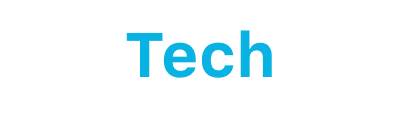
<style>
.page{position:relative;width:400px;height:120px;background:#ffffff}
.page>*{position:absolute;margin:0}
.t1{font:62.5px "SFUIText-Bold";letter-spacing:0.01em;color:#08b2e3}
</style>
<div class="page">
<p class="t1" style="left:126px;top:30px;width:146px;height:48px">Tech</p>
</div>
